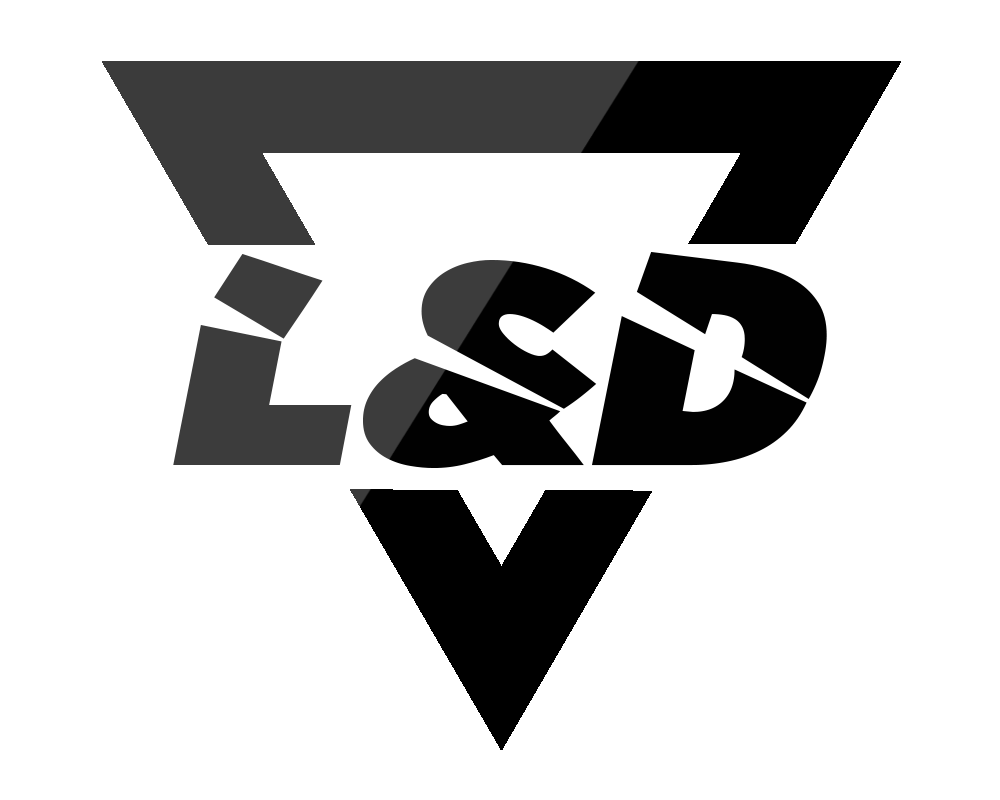
<style>
.page{position:relative;width:1000px;height:800px;background:#ffffff}
.page>*{position:absolute;margin:0}
.t1{font:310px "A-Cuchillada";color:#010101}
</style>
<div class="page">
<p class="t1" style="left:173px;top:252px;width:654px;height:216px">L&amp;D</p>
</div>
